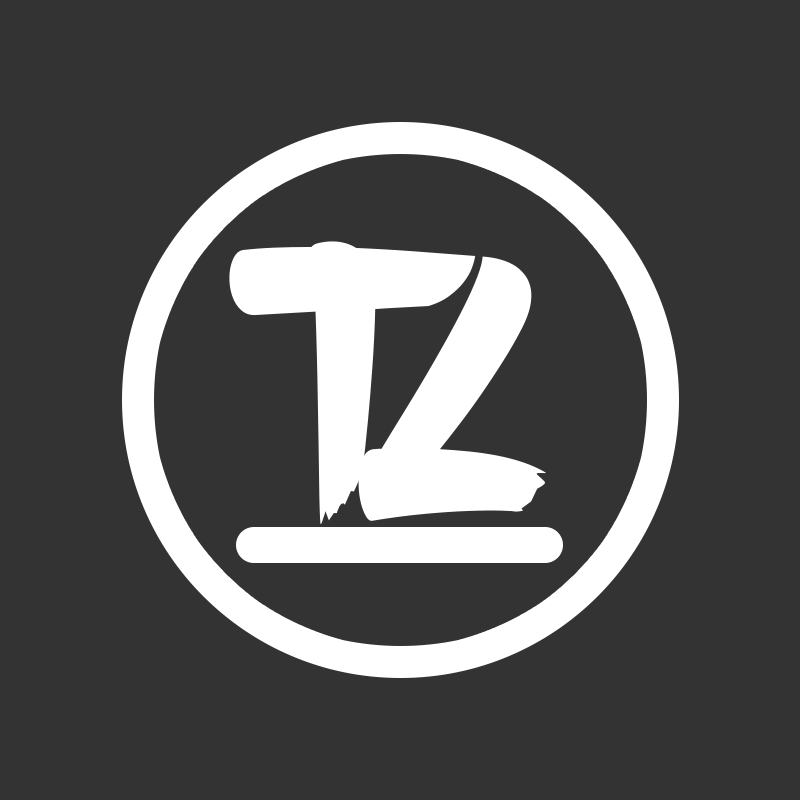
<style>
.page{position:relative;width:800px;height:800px;background:#333333}
.page>*{position:absolute;margin:0}
.t1{font:380.4px "BlowBrush";color:#ffffff}
</style>
<div class="page">
<p class="t1" style="left:229px;top:241px;width:247px;height:283px">T</p>
<p class="t1" style="left:358px;top:256px;width:188px;height:265px;rotate:27deg">L</p>
</div>
